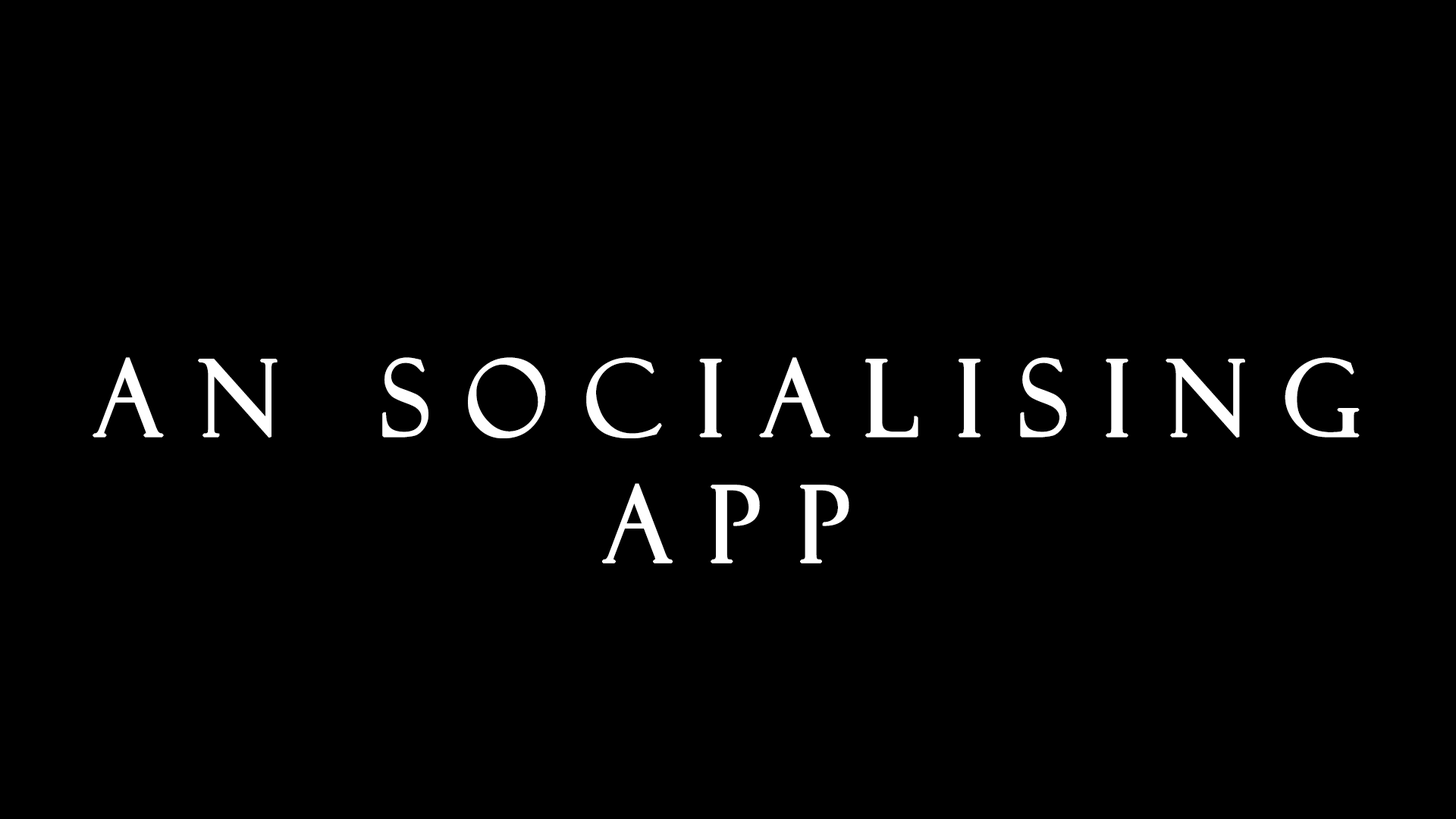
<style>
.page{position:relative;width:1456px;height:819px;background:#000000}
.page>*{position:absolute;margin:0}
.t1{font:105.1px "FelixTitlingMT";letter-spacing:0.34em;color:#ffffff;font-weight:bold;scale:0.95 1}
</style>
<div class="page">
<p class="t1" style="left:93px;top:357px;width:1267px;height:206px;text-align:center">An socialising<br>app</p>
</div>
